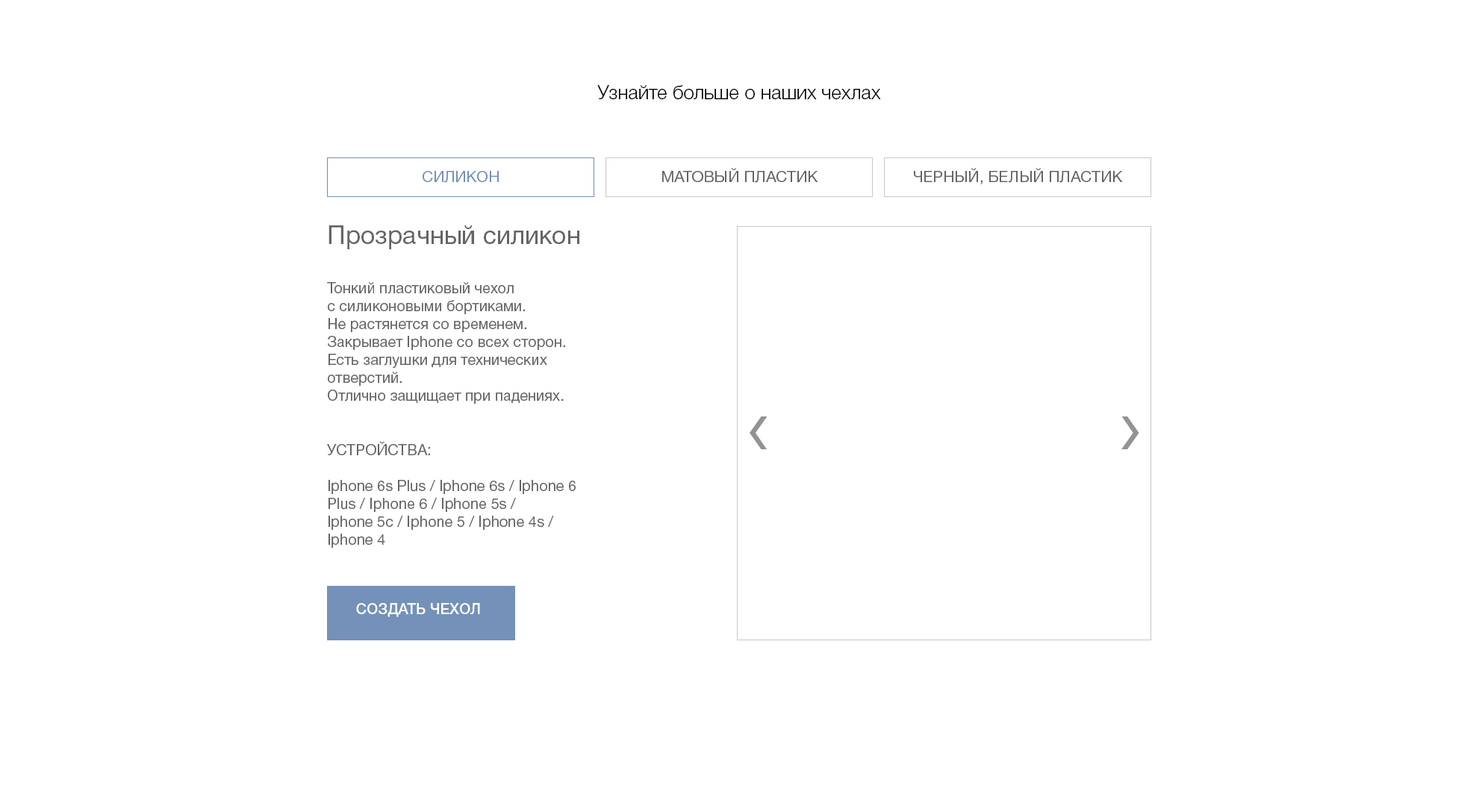
<style>
.page{position:relative;width:1479px;height:806px;background:#ffffff}
.page>*{position:absolute;margin:0}
.t1{font:19.4px "HelveticaNeueCyr-Light";color:#000000}
.t2{font:15.7px "HelveticaNeueCyr-Roman";color:#7491b9}
.t3{font:15.7px "HelveticaNeueCyr-Roman";color:#656565}
.t4{font:14.9px "HelveticaNeueCyr-Roman";color:#656565}
.t5{font:25.4px "HelveticaNeueCyr-Roman";color:#656565}
.t6{font:15.1px "HelveticaNeueCyr-Roman";color:#656565}
.t7{font:14.9px "HelveticaNeueCyr-Medium";color:#ffffff}
</style>
<div class="page">
<p class="t1" style="left:597px;top:85px;width:284px;height:14px">Узнайте больше о наших чехлах</p>
<p class="t2" style="left:423px;top:171px;width:76px;height:12px">СИЛИКОН</p>
<p class="t3" style="left:662px;top:168px;width:156px;height:15px">МАТОВЫЙ ПЛАСТИК</p>
<p class="t3" style="left:914px;top:168px;width:209px;height:16px">ЧЕРНЫЙ, БЕЛЫЙ ПЛАСТИК</p>
<p class="t4" style="left:327px;top:225px;width:252px;height:323px"><span class="t5">Прозрачный силикон<br><br></span>Тонкий пластиковый чехол<br>с силиконовыми бортиками. <br>Не растянется со временем.<br>Закрывает Iphone со всех сторон. Есть заглушки для технических отверстий.<br>Отлично защищает при падениях.<br><span class="t6"><br><br>УСТРОЙСТВА:<br><br></span>Iphone 6s Plus / Iphone 6s / Iphone 6 Plus / Iphone 6 / Iphone 5s /<br>Iphone 5c / Iphone 5 / Iphone 4s / Iphone 4</p>
<p class="t7" style="left:356px;top:603px;width:124px;height:14px">СОЗДАТЬ ЧЕХОЛ</p>
</div>
